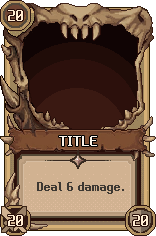
<style>
.page{position:relative;width:156px;height:236px}
.page>*{position:absolute;margin:0}
.t1{font:17px "NeoDunggeunmoPro-Regular";color:#ffecd2;text-transform:uppercase}
.t2{font:16px "NeoDunggeunmoPro-Regular";color:#fcf5ea;text-transform:uppercase}
.t3{font:14px "NeoDunggeunmoPro-Regular";color:#3d3832}
</style>
<div class="page">
<p class="t1" style="left:8px;top:10px;width:15px;height:11px">20</p>
<p class="t2" style="left:59px;top:136px;width:38px;height:10px">tItLE</p>
<p class="t3" style="left:37px;top:182px;width:87px;height:12px">Deal 6 damage.</p>
<p class="t1" style="left:8px;top:215px;width:15px;height:11px">20</p>
<p class="t1" style="left:133px;top:215px;width:15px;height:11px">20</p>
</div>
